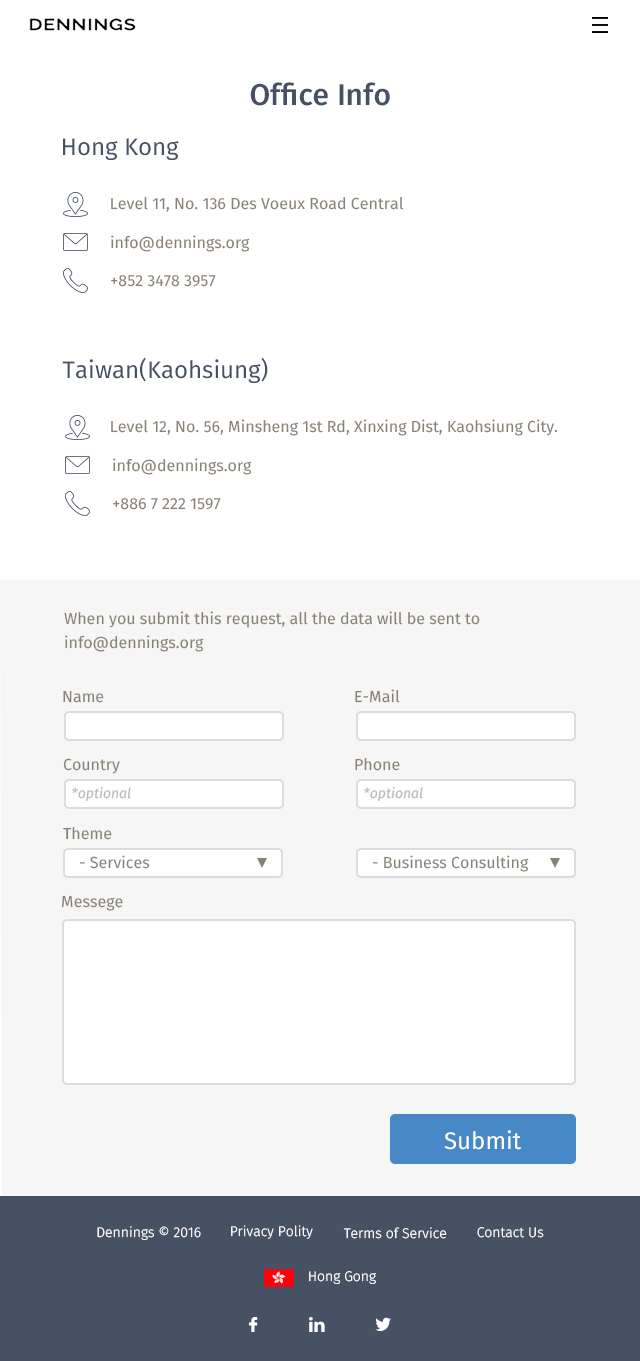
<style>
.page{position:relative;width:640px;height:1361px;background:#ffffff}
.page>*{position:absolute;margin:0}
.t1{font:30px "FiraSans-Medium";color:#465163}
.t2{font:24px "FiraSans-Regular";color:#465163}
.t3{font:16px "FiraSans-Regular";color:#898176}
.t4{font:16px/24px "FiraSans-Regular";color:#898176}
.t5{font:14px "FiraSans-Italic";color:#bababa}
.t6{font:24px "FiraSans-Regular";color:#ffffff}
.t7{font:14px "FiraSans-Light";color:#ffffff}
</style>
<div class="page">
<p class="t1" style="left:250px;top:82px;width:140px;height:24px">Office Info</p>
<p class="t2" style="left:63px;top:138px;width:116px;height:22px">Hong Kong</p>
<p class="t3" style="left:111px;top:196px;width:292px;height:16px">Level 11, No. 136 Des Voeux Road Central</p>
<p class="t3" style="left:111px;top:235px;width:139px;height:17px">info@dennings.org</p>
<p class="t3" style="left:111px;top:275px;width:105px;height:12px">+852 3478 3957</p>
<p class="t2" style="left:62px;top:357px;width:206px;height:26px">Taiwan(Kaohsiung)</p>
<p class="t3" style="left:111px;top:419px;width:446px;height:17px">Level 12, No. 56, Minsheng 1st Rd, Xinxing Dist, Kaohsiung City.</p>
<p class="t3" style="left:113px;top:458px;width:139px;height:17px">info@dennings.org</p>
<p class="t3" style="left:113px;top:498px;width:108px;height:12px">+886 7 222 1597</p>
<p class="t4" style="left:64px;top:611px;width:416px;height:41px">When you submit this request, all the data will be sent to info@dennings.org</p>
<p class="t3" style="left:355px;top:689px;width:45px;height:14px">E-Mail</p>
<p class="t3" style="left:63px;top:690px;width:41px;height:13px">Name</p>
<p class="t3" style="left:63px;top:758px;width:57px;height:16px">Country</p>
<p class="t3" style="left:355px;top:758px;width:45px;height:13px">Phone</p>
<p class="t5" style="left:72px;top:786px;width:59px;height:16px">*optional</p>
<p class="t5" style="left:364px;top:786px;width:59px;height:16px">*optional</p>
<p class="t3" style="left:63px;top:827px;width:49px;height:13px">Theme</p>
<p class="t3" style="left:80px;top:855px;width:70px;height:14px">- Services</p>
<p class="t3" style="left:373px;top:855px;width:156px;height:17px">- Business Consulting</p>
<p class="t3" style="left:61px;top:895px;width:62px;height:16px">Messege</p>
<p class="t6" style="left:444px;top:1130px;width:78px;height:20px">Submit</p>
<p class="t7" style="left:97px;top:1226px;width:104px;height:14px">Dennings © 2016</p>
<p class="t7" style="left:231px;top:1225px;width:82px;height:14px">Privacy Polity</p>
<p class="t7" style="left:343px;top:1227px;width:104px;height:12px">Terms of Service</p>
<p class="t7" style="left:477px;top:1227px;width:67px;height:11px">Contact Us</p>
<p class="t7" style="left:309px;top:1271px;width:67px;height:13px">Hong Gong</p>
</div>
